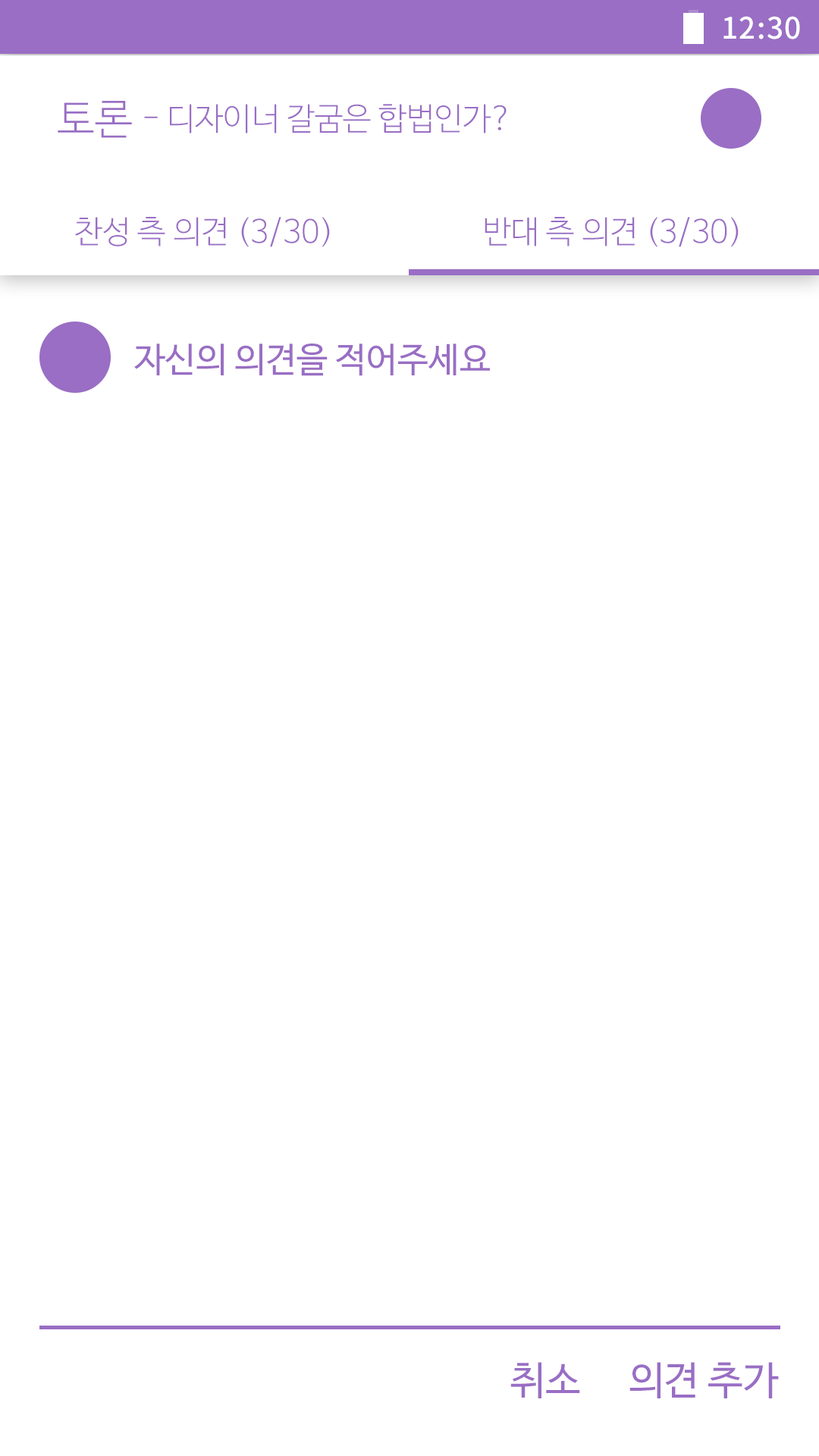
<style>
.page{position:relative;width:819px;height:1456px;background:#ffffff}
.page>*{position:absolute;margin:0}
.t1{font:29.6px "NotoSansCJKkr-Medium";letter-spacing:0.029em;color:#ffffff}
.t2{font:42.3px "NanumBarunGothicLight";color:#996ec4}
.t3{font:31.6px "NanumBarunGothicLight";color:#996ec4}
.t4{font:34.8px "NanumBarunGothic";color:#996ec4}
.t5{font:39.4px "NanumBarunGothic";color:#996ec4}
</style>
<div class="page">
<p class="t1" style="left:723px;top:16px;width:77px;height:23px">12:30</p>
<p class="t2" style="left:58px;top:101px;width:74px;height:37px">토론</p>
<p class="t3" style="left:144px;top:104px;width:363px;height:29px">- 디자이너 갈굼은 합법인가?</p>
<p class="t3" style="left:75px;top:217px;width:255px;height:30px">찬성 측 의견 (3/30)</p>
<p class="t3" style="left:485px;top:217px;width:254px;height:30px">반대 측 의견 (3/30)</p>
<p class="t4" style="left:134px;top:344px;width:356px;height:32px">자신의 의견을 적어주세요</p>
<p class="t5" style="left:510px;top:1362px;width:70px;height:36px">취소</p>
<p class="t5" style="left:629px;top:1362px;width:150px;height:36px">의견 추가</p>
</div>
